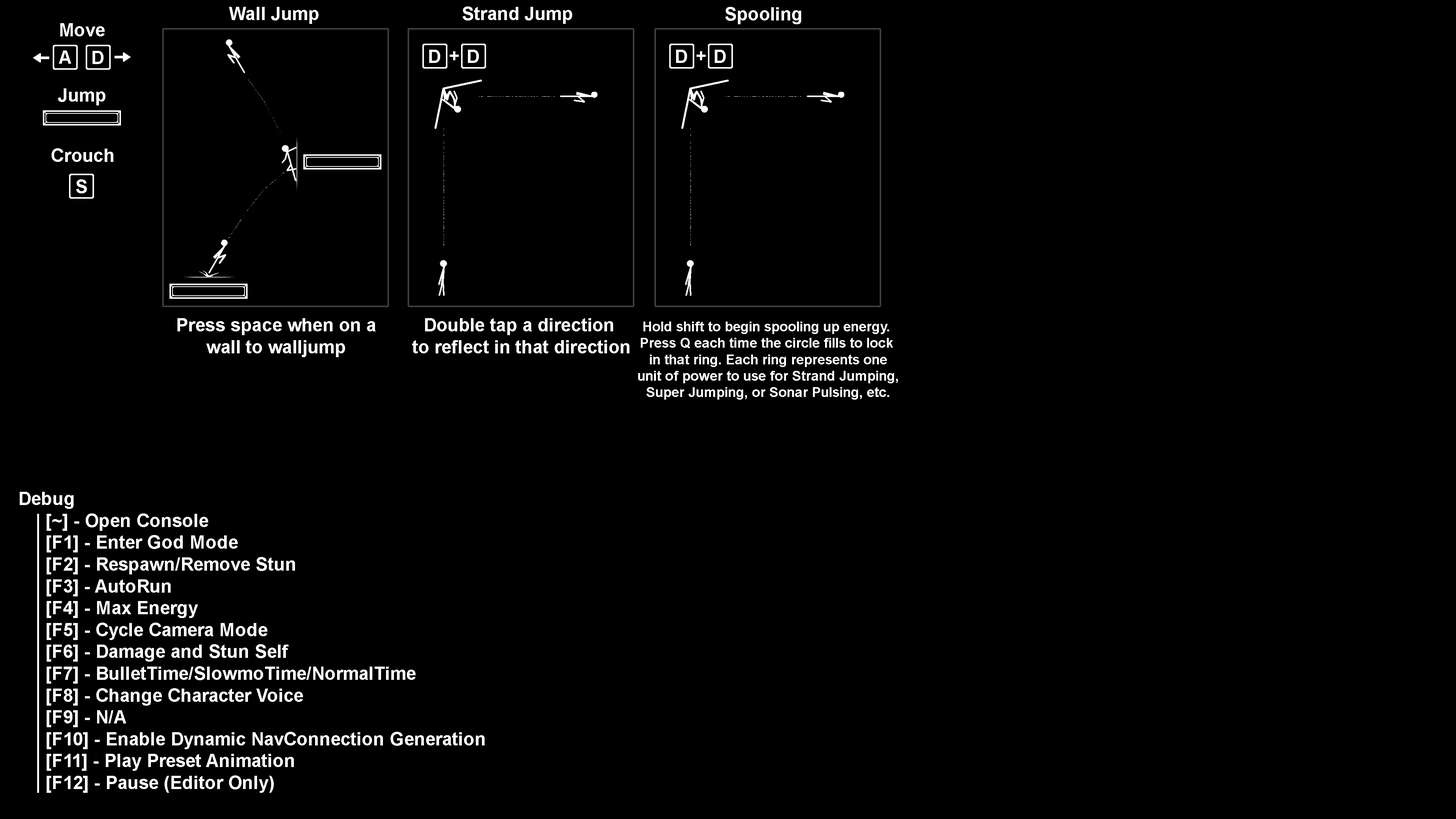
<style>
.page{position:relative;width:1456px;height:819px;background:#000000}
.page>*{position:absolute;margin:0}
.t1{font:18.2px "Arial-BoldMT";color:#ffffff}
.t2{font:13.6px "Arial-BoldMT";color:#ffffff}
</style>
<div class="page">
<p class="t1" style="left:229px;top:7px;width:89px;height:17px">Wall Jump</p>
<p class="t1" style="left:463px;top:6px;width:109px;height:18px">Strand Jump</p>
<p class="t1" style="left:725px;top:7px;width:76px;height:17px">Spooling</p>
<p class="t1" style="left:60px;top:23px;width:45px;height:13px">Move</p>
<p class="t1" style="left:59px;top:50px;width:12px;height:14px">A</p>
<p class="t1" style="left:93px;top:51px;width:11px;height:13px">D</p>
<p class="t1" style="left:429px;top:50px;width:11px;height:13px">D</p>
<p class="t1" style="left:450px;top:51px;width:9px;height:9px">+</p>
<p class="t1" style="left:468px;top:50px;width:11px;height:13px">D</p>
<p class="t1" style="left:676px;top:50px;width:11px;height:13px">D</p>
<p class="t1" style="left:697px;top:51px;width:9px;height:9px">+</p>
<p class="t1" style="left:715px;top:50px;width:11px;height:13px">D</p>
<p class="t1" style="left:58px;top:88px;width:47px;height:17px">Jump</p>
<p class="t1" style="left:52px;top:148px;width:61px;height:14px">Crouch</p>
<p class="t1" style="left:76px;top:179px;width:11px;height:14px">S</p>
<p class="t1" style="left:177px;top:318px;width:199px;height:39px;text-align:center">Press space when on a<br>wall to walljump</p>
<p class="t1" style="left:412px;top:318px;width:217px;height:35px;text-align:center">Double tap a direction <br>to reflect in that direction</p>
<p class="t2" style="left:638px;top:322px;width:260px;height:78px;text-align:center">Hold shift to begin spooling up energy. <br>Press Q each time the circle fills to lock <br>in that ring. Each ring represents one<br>unit of power to use for Strand Jumping,<br>Super Jumping, or Sonar Pulsing, etc.</p>
<p class="t1" style="left:20px;top:492px;width:465px;height:301px">Debug<br> [~] - Open Console<br> [F1] - Enter God Mode<br> [F2] - Respawn/Remove Stun<br> [F3] - AutoRun<br> [F4] - Max Energy<br> [F5] - Cycle Camera Mode<br> [F6] - Damage and Stun Self<br> [F7] - BulletTime/SlowmoTime/NormalTime<br> [F8] - Change Character Voice<br> [F9] - N/A<br> [F10] - Enable Dynamic NavConnection Generation<br> [F11] - Play Preset Animation<br> [F12] - Pause (Editor Only)</p>
</div>
